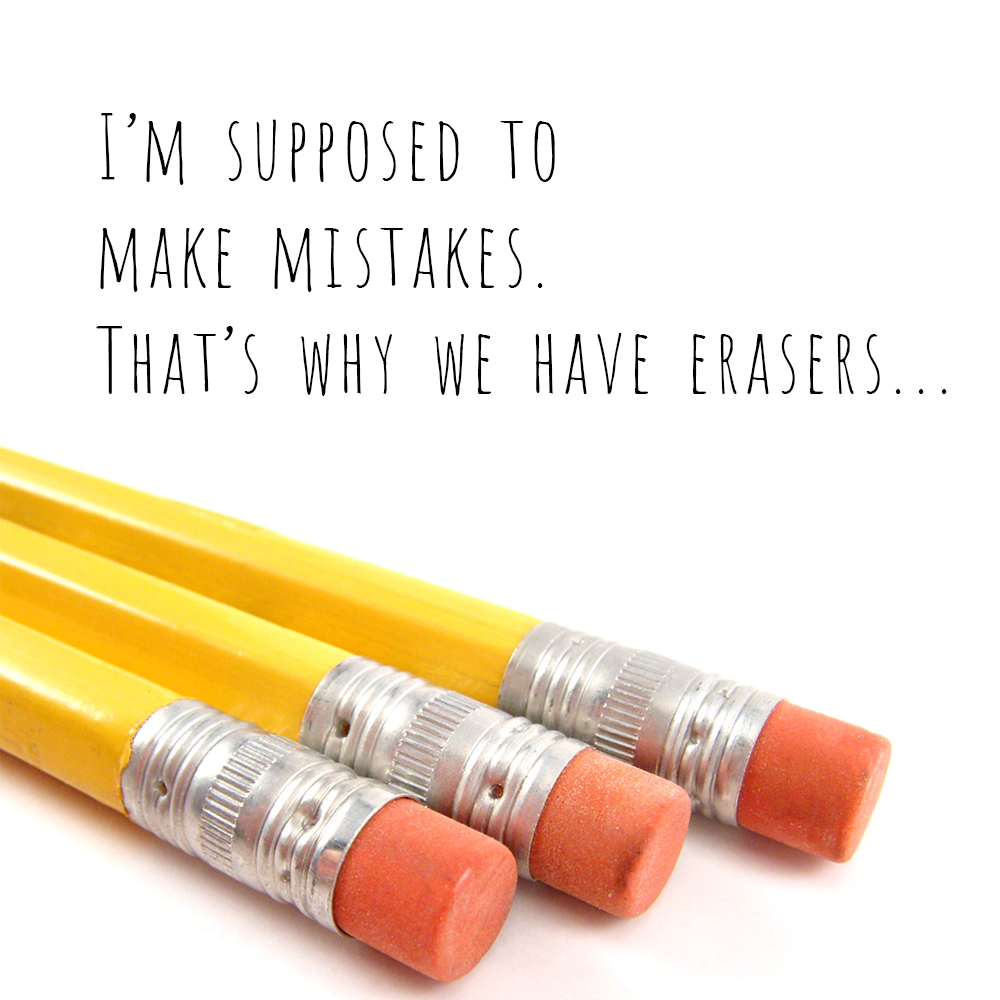
<style>
.page{position:relative;width:1000px;height:1000px;background:#ffffff}
.page>*{position:absolute;margin:0}
.t1{font:88.9px "Amatic";color:#000000}
</style>
<div class="page">
<p class="t1" style="left:96px;top:113px;width:851px;height:283px">I’m supposed to <br>make mistakes.<br>That’s why we have erasers...</p>
</div>
